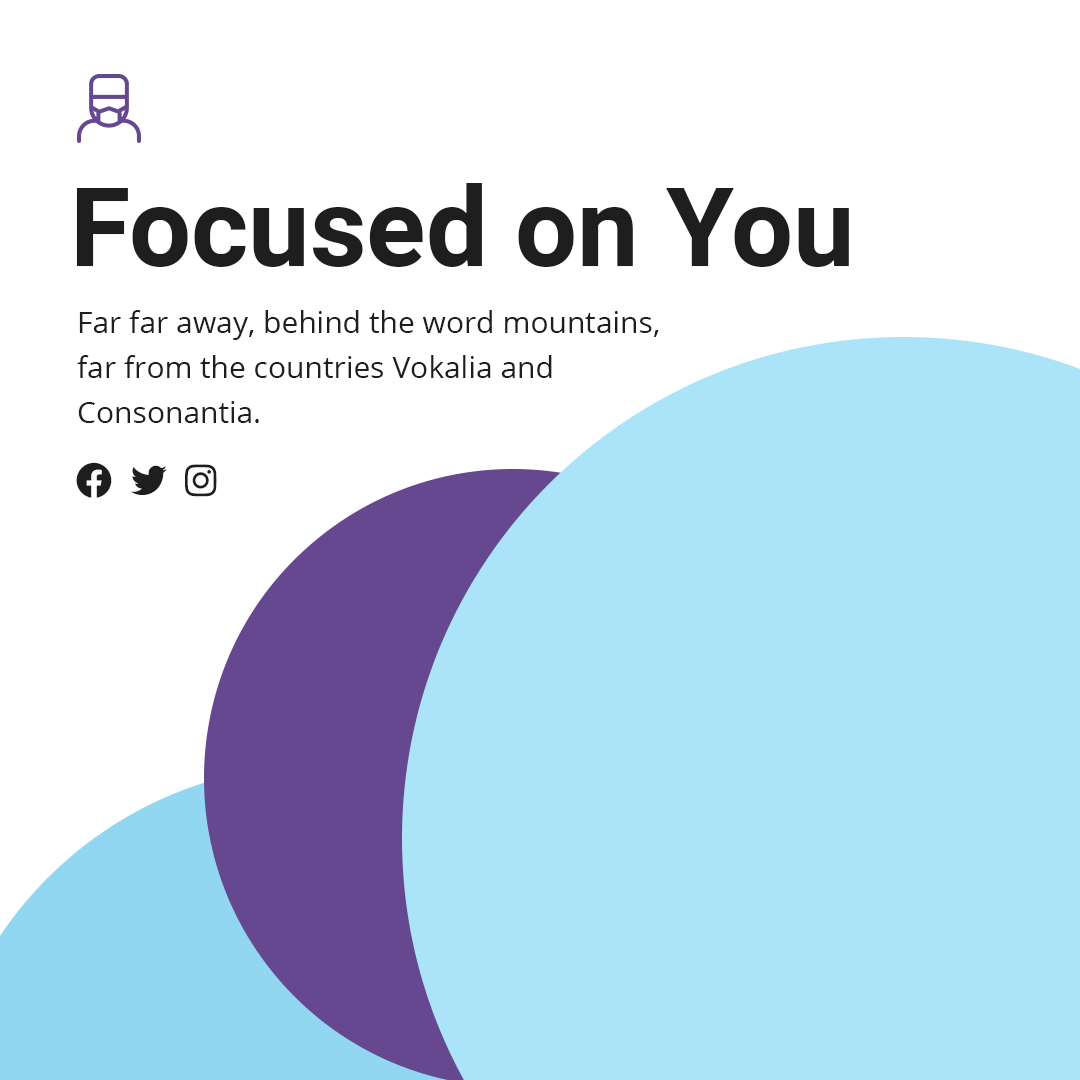
<style>
.page{position:relative;width:1080px;height:1080px;background:#ffffff}
.page>*{position:absolute;margin:0}
.t1{font:110px "Roboto-Bold";color:#1e1e1e}
.t2{font:30px/45px "OpenSans-Regular";color:#1e1e1e}
</style>
<div class="page">
<p class="t1" style="left:76px;top:183px;width:773px;height:84px">Focused on You</p>
<p class="t2" style="left:77px;top:310px;width:582px;height:113px">Far far away, behind the word mountains, far from the countries Vokalia and Consonantia.</p>
</div>
